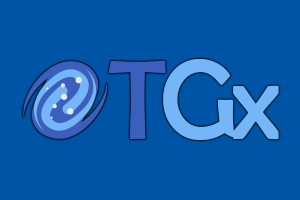
<style>
.page{position:relative;width:300px;height:200px;background:#0054a6}
.page>*{position:absolute;margin:0}
.t1{font:113.5px "BerlinSansFB-Reg";letter-spacing:-0.05em;color:#74b6f7}
.t2{font:113.5px "BerlinSansFB-Reg";letter-spacing:-0.05em;color:#3a5fbc}
</style>
<div class="page">
<p class="t1" style="left:108px;top:59px;width:171px;height:81px"><span class="t2">T</span>Gx</p>
</div>
